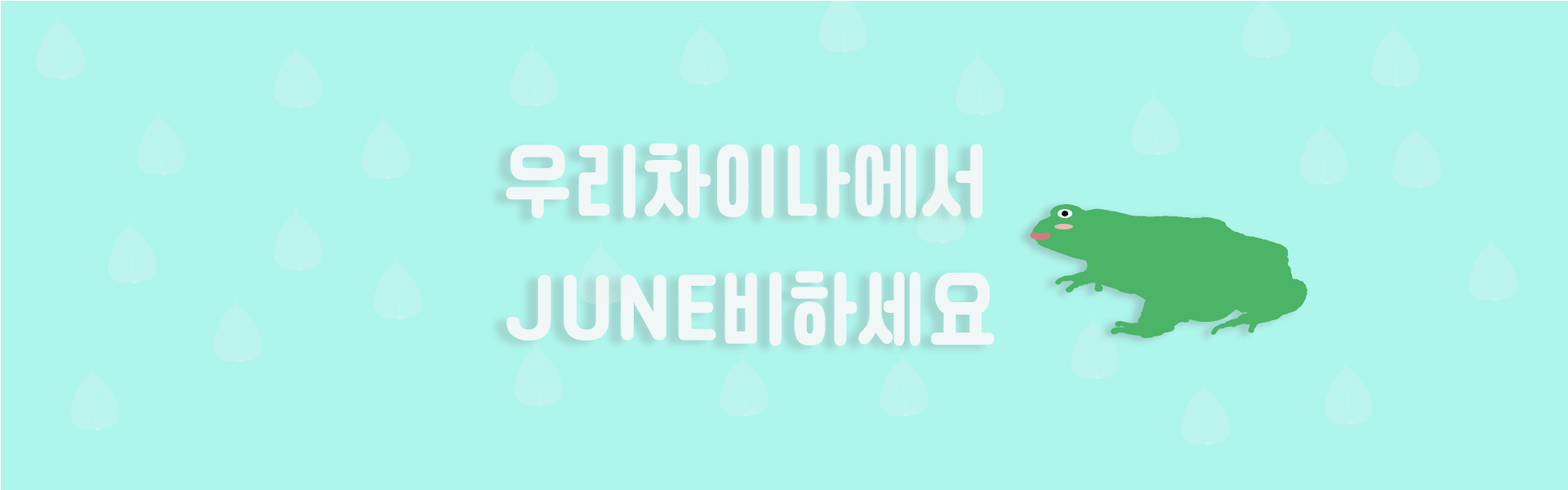
<style>
.page{position:relative;width:1568px;height:490px;background:#aef5ec}
.page>*{position:absolute;margin:0}
.t1{font:85.6px "Cafe24Ssurround";color:#f1f7f6;font-weight:bold;scale:0.83 1}
</style>
<div class="page">
<p class="t1" style="left:506px;top:143px;width:476px;height:75px">우리차이나에서</p>
<p class="t1" style="left:506px;top:270px;width:489px;height:76px">JUNE비하세요</p>
</div>
